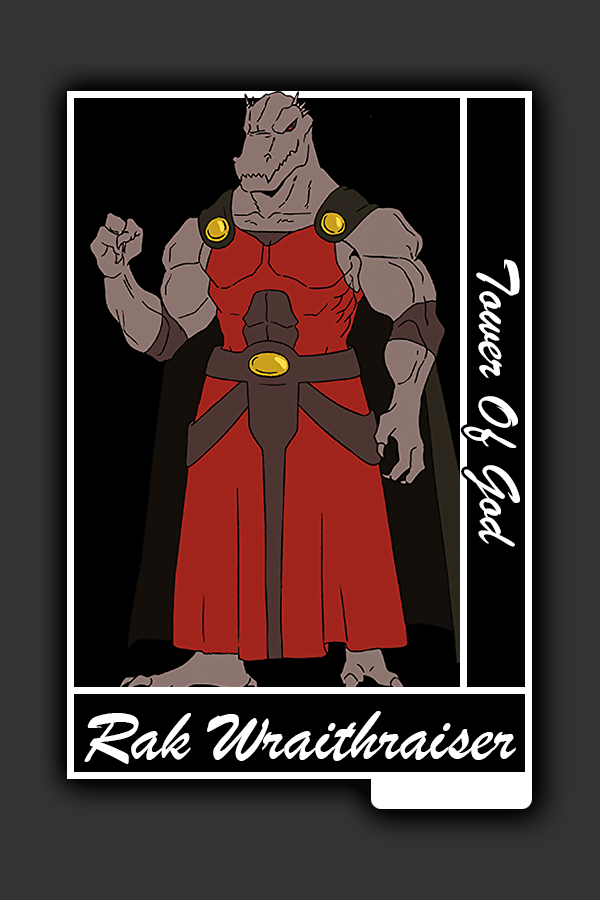
<style>
.page{position:relative;width:600px;height:900px;background:#000000}
.page>*{position:absolute;margin:0}
.t1{font:61.5px "BrushScriptMT";color:#ffffff}
.t2{font:75px "BrushScriptMT";color:#ffffff}
</style>
<div class="page">
<p class="t1" style="left:463px;top:259px;width:57px;height:288px;rotate:90deg">Tower Of God</p>
<p class="t2" style="left:84px;top:711px;width:432px;height:53px">Rak Wraithraiser</p>
</div>
